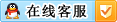
<style>
.page{position:relative;width:117px;height:22px}
.page>*{position:absolute;margin:0}
.t1{font:14px "SimSun";letter-spacing:0.08em;color:#000000;font-weight:bold}
</style>
<div class="page">
<p class="t1" style="left:26px;top:4px;width:61px;height:14px">在线客服</p>
</div>
